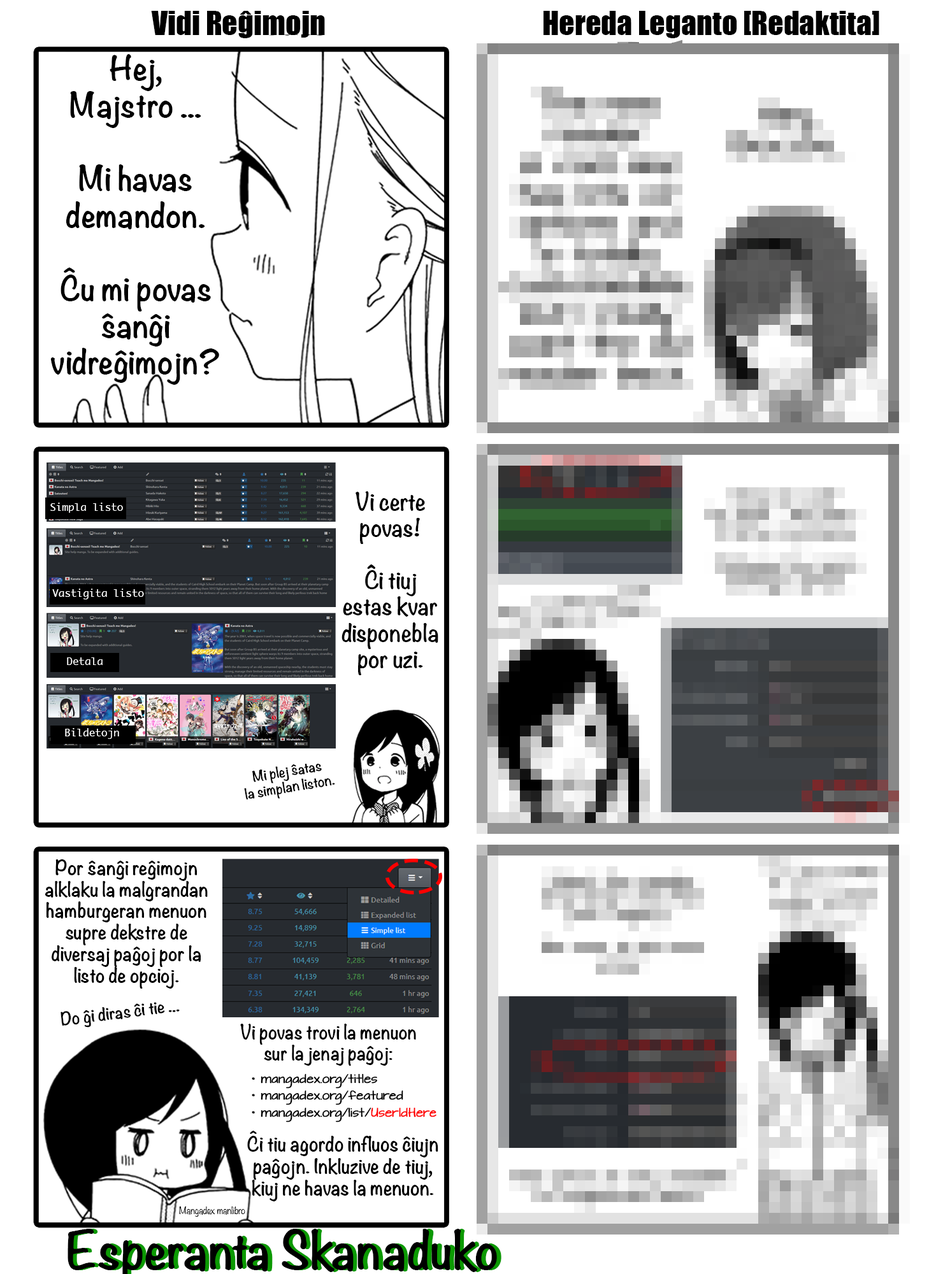
<style>
.page{position:relative;width:936px;height:1274px;background:#ffffff}
.page>*{position:absolute;margin:0}
.t1{font:30.6px "Impact";color:#000000}
.t2{font:30.6px "Noteworthy-Bold";color:#000000}
.t3{font:21.9px "Noteworthy-Bold";color:#000000}
.t4{font:10.2px "Ayuthaya";color:#ffffff}
.t5{font:13.2px "Noteworthy-Bold";color:#000000}
.t6{font:18px "Noteworthy-Bold";color:#000000}
.t7{font:15.9px "Noteworthy-Bold";color:#000000}
.t8{font:17.5px "Noteworthy-Bold";color:#000000}
.t9{font:18.3px "Noteworthy-Bold";color:#000000}
.t10{font:9.1px "Noteworthy-Light";color:#000000}
</style>
<div class="page">
<p class="t1" style="left:151px;top:11px;width:174px;height:27px">Vidi Reĝimojn</p>
<p class="t1" style="left:543px;top:11px;width:336px;height:27px">Hereda Leganto [Redaktita]</p>
<p class="t2" style="left:50px;top:54px;width:169px;height:331px;text-align:center">Hej,<br>Majstro ...<br><br>Mi havas demandon.<br><br>Ĉu mi povas ŝanĝi vidreĝimojn?</p>
<p class="t3" style="left:341px;top:491px;width:97px;height:184px;text-align:center">Vi certe povas!<br><br>Ĉi tiuj estas kvar disponebla por uzi.</p>
<p class="t4" style="left:50px;top:503px;width:73px;height:10px">Simpla listo</p>
<p class="t4" style="left:52px;top:589px;width:92px;height:10px">Vastigita listo</p>
<p class="t4" style="left:67px;top:657px;width:36px;height:8px">Detala</p>
<p class="t4" style="left:65px;top:728px;width:54px;height:11px">Bildetojn</p>
<p class="t5" style="left:244px;top:763px;width:91px;height:37px;text-align:center;rotate:-10deg">Mi plej ŝatas <br>la simplan liston.</p>
<p class="t6" style="left:45px;top:859px;width:163px;height:130px;text-align:center">Por ŝanĝi reĝimojn alklaku la malgrandan hamburgeran menuon supre dekstre de diversaj paĝoj por la listo de opcioj.</p>
<p class="t7" style="left:61px;top:1002px;width:119px;height:26px;rotate:-7deg">Do ĝi diras ĉi tie ...</p>
<p class="t8" style="left:240px;top:1024px;width:176px;height:42px;text-align:center">Vi povas trovi la menuon sur la jenaj paĝoj:</p>
<p class="t9" style="left:247px;top:1131px;width:191px;height:71px;text-align:center">Ĉi tiu agordo influos ĉiujn paĝojn. Inkluzive de tiuj, kiuj ne havas la menuon.</p>
<p class="t10" style="left:179px;top:1207px;width:66px;height:10px">Mangadex manlibro</p>
</div>
